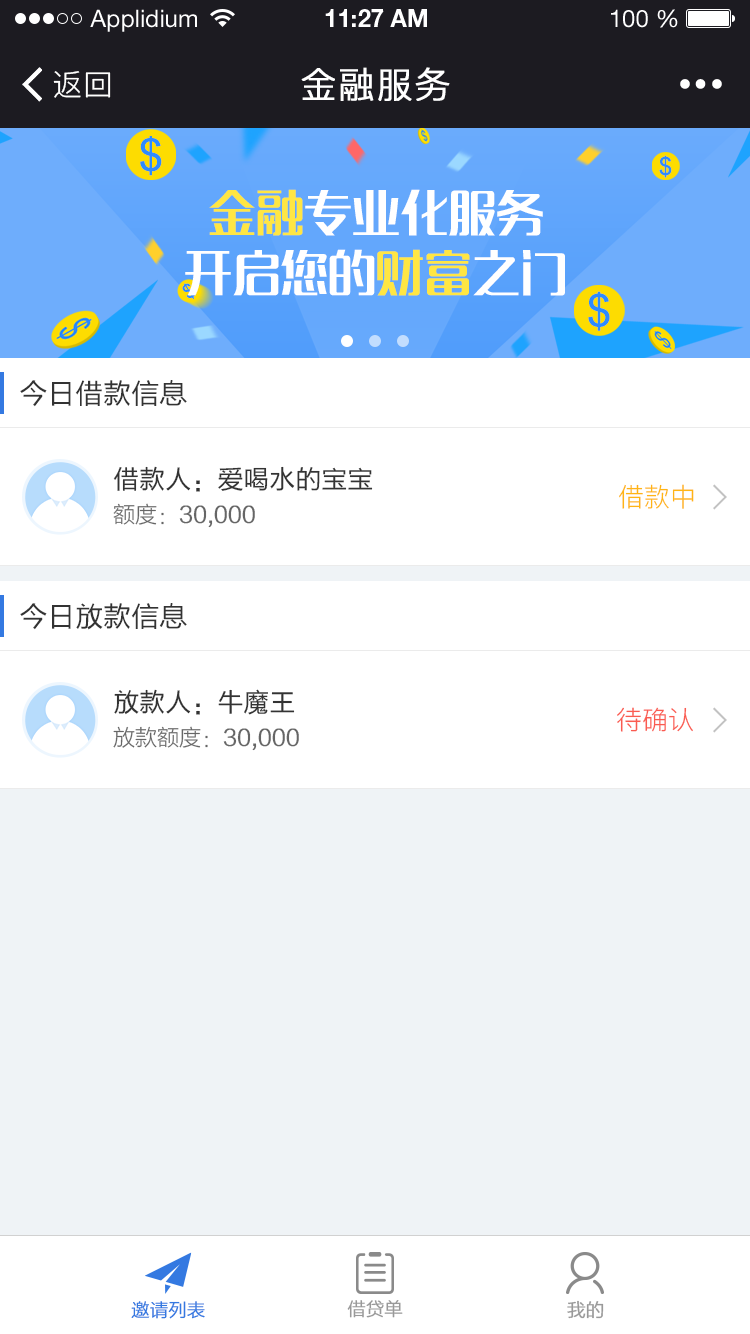
<style>
.page{position:relative;width:750px;height:1334px;background:#ffffff}
.page>*{position:absolute;margin:0}
.t1{font:24px "HelveticaNeueLTStd-Roman";color:#ffffff}
.t2{font:24px "HelveticaNeueLTStd-Bd";color:#ffffff}
.t3{font:30px "PingFang-SC-Regular";letter-spacing:0.025em;color:#ffffff}
.t4{font:36px "PingFang-SC-Regular";letter-spacing:0.025em;color:#ffffff;font-weight:bold}
.t5{font:48px/60px "MFLangQian_Noncommercial-Regular";color:#ffffff}
.t6{font:48px/60px "MFLangQian_Noncommercial-Regular";color:#ffe643}
.t7{font:28px "FZLTH_YS_GBK";color:#333333}
.t8{font:26px "FZLTH_YS_GBK";color:#333333}
.t9{font:26px "PingFang-SC-Regular";color:#ffb514}
.t10{font:22px "FZLTXHK--GBK1-0";color:#666666;font-weight:bold}
.t11{font:22px "FZLTXHK--GBK1-0";color:#666666}
.t12{font:26px "PingFang-SC-Regular";color:#fa5b50}
.t13{font:18px "FZLTXHK--GBK1-0";color:#3479e1;font-weight:bold}
.t14{font:18px "FZLTXHK--GBK1-0";color:#999999;font-weight:bold}
</style>
<div class="page">
<p class="t1" style="left:90px;top:9px;width:107px;height:23px">Applidium</p>
<p class="t2" style="left:325px;top:9px;width:102px;height:18px">11:27 AM</p>
<p class="t1" style="left:611px;top:9px;width:67px;height:19px">100 %</p>
<p class="t3" style="left:53px;top:71px;width:58px;height:27px">返回</p>
<p class="t4" style="left:301px;top:67px;width:149px;height:34px">金融服务</p>
<p class="t5" style="left:185px;top:189px;width:380px;height:107px;text-align:center"><span class="t6">金融</span>专业化服务<br>开启您的<span class="t6">财富</span>之门</p>
<p class="t7" style="left:20px;top:380px;width:167px;height:27px">今日借款信息</p>
<p class="t8" style="left:113px;top:466px;width:260px;height:26px">借款人：爱喝水的宝宝</p>
<p class="t9" style="left:619px;top:484px;width:75px;height:25px">借款中</p>
<p class="t10" style="left:113px;top:503px;width:142px;height:25px"><span class="t11">额度：</span>30,000</p>
<p class="t7" style="left:20px;top:603px;width:167px;height:27px">今日放款信息</p>
<p class="t8" style="left:114px;top:689px;width:181px;height:26px">放款人：牛魔王</p>
<p class="t12" style="left:617px;top:707px;width:76px;height:25px">待确认</p>
<p class="t10" style="left:113px;top:726px;width:186px;height:25px"><span class="t11">放款额度：</span>30,000</p>
<p class="t13" style="left:131px;top:1301px;width:74px;height:18px">邀请列表</p>
<p class="t14" style="left:347px;top:1300px;width:56px;height:18px">借贷单</p>
<p class="t14" style="left:567px;top:1300px;width:37px;height:19px">我的</p>
</div>
